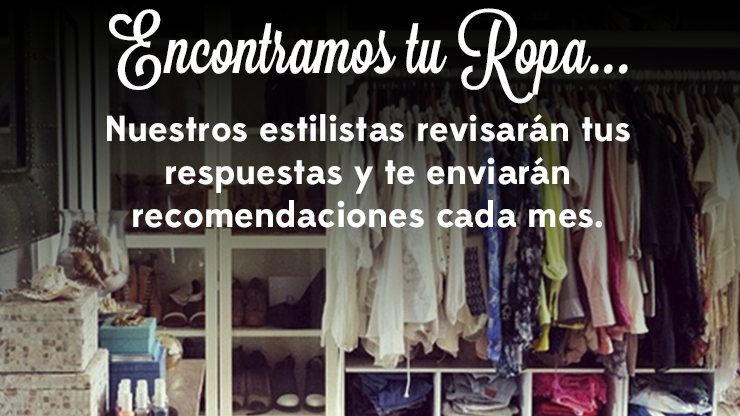
<style>
.page{position:relative;width:740px;height:416px}
.page>*{position:absolute;margin:0}
.t1{font:72px "Lavanderia-Sturdy";color:#ffffff}
.t2{font:36px "Edmondsans-Bold";color:#ffffff}
</style>
<div class="page">
<p class="t1" style="left:109px;top:8px;width:519px;height:96px">Encontramos tu Ropa...</p>
<p class="t2" style="left:107px;top:114px;width:523px;height:114px;text-align:center">Nuestros estilistas revisarán tus respuestas y te enviarán recomendaciones cada mes.</p>
</div>
